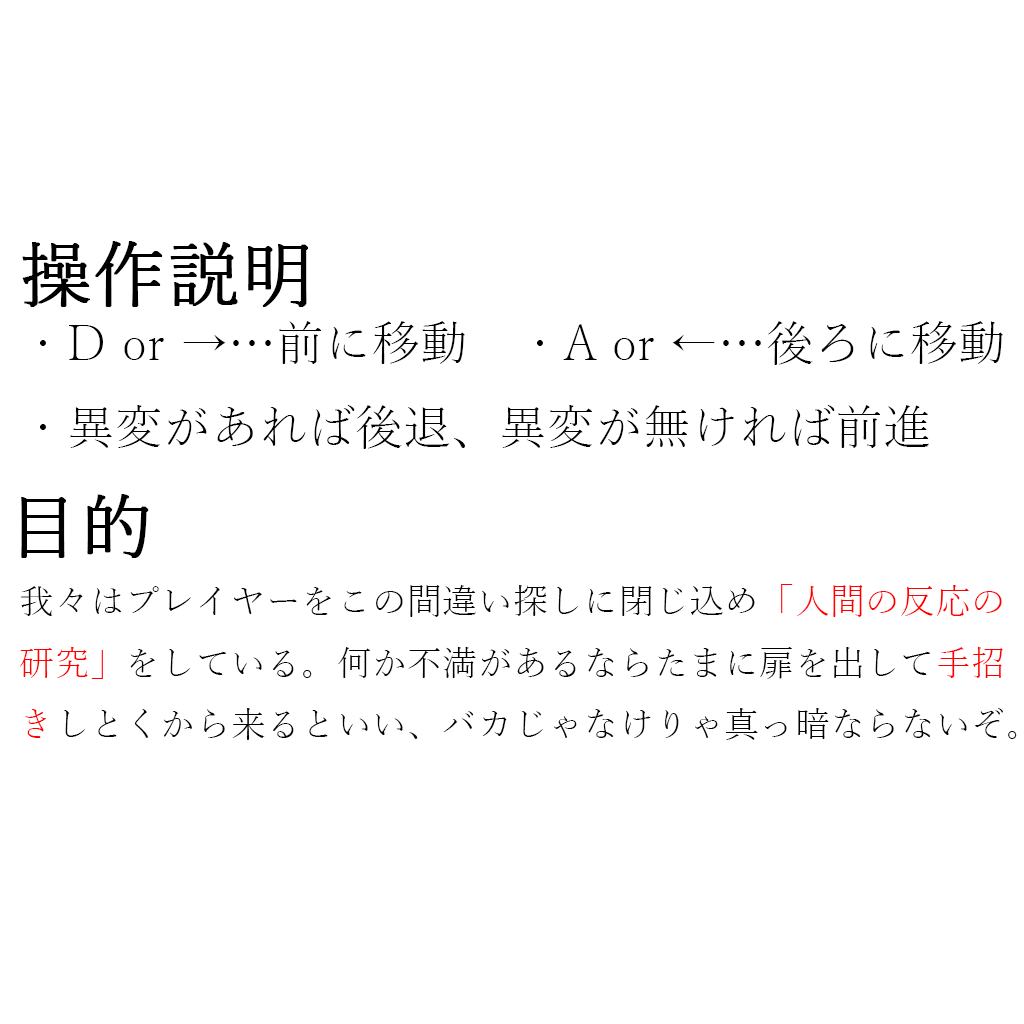
<style>
.page{position:relative;width:1024px;height:1024px;background:#ffffff}
.page>*{position:absolute;margin:0}
.t1{font:72px "YuMincho-Light";color:#000000;font-weight:bold}
.t2{font:48px "YuMincho-Light";color:#000000}
.t3{font:35.2px "YuMincho-Light";color:#000000}
.t4{font:35.2px "YuMincho-Light";color:#ff0000}
</style>
<div class="page">
<p class="t1" style="left:22px;top:241px;width:286px;height:66px">操作説明</p>
<p class="t2" style="left:40px;top:321px;width:963px;height:128px">・D or →…前に移動　・A or ←…後ろに移動<br>・異変があれば後退、異変が無ければ前進</p>
<p class="t1" style="left:21px;top:494px;width:128px;height:64px">目的</p>
<p class="t3" style="left:20px;top:584px;width:997px;height:156px">我々はプレイヤーをこの間違い探しに閉じ込め<span class="t4">「人間の反応の<br>研究」</span>をしている。何か不満があるならたまに扉を出して<span class="t4">手招<br>き</span>しとくから来るといい、バカじゃなけりゃ真っ暗ならないぞ。</p>
</div>
